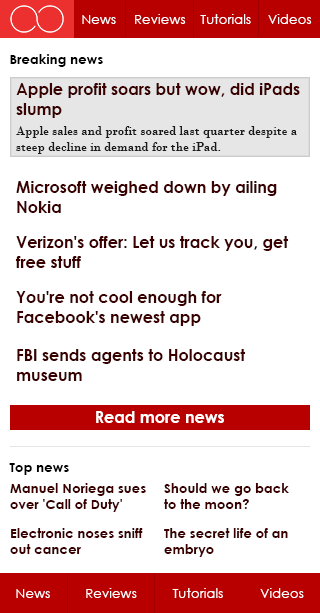
<style>
.page{position:relative;width:320px;height:613px;background:#ffffff}
.page>*{position:absolute;margin:0}
.t1{font:13.3px "CenturyGothic";color:#ffffff}
.t2{font:13.3px "CenturyGothic-Bold";color:#000000}
.t3{font:16px "CenturyGothic-Bold";color:#3a0000}
.t4{font:13.3px "BodoniMT";color:#1a1a1a}
.t5{font:12px "CenturyGothic-Bold";color:#ffffff}
.t6{font:13.3px "CenturyGothic-Bold";color:#3a0000}
</style>
<div class="page">
<p class="t1" style="left:82px;top:15px;width:34px;height:9px">News</p>
<p class="t1" style="left:135px;top:14px;width:51px;height:10px">Reviews</p>
<p class="t1" style="left:200px;top:14px;width:51px;height:10px">Tutorials</p>
<p class="t1" style="left:268px;top:14px;width:44px;height:10px">Videos</p>
<p class="t2" style="left:10px;top:54px;width:93px;height:13px">Breaking news</p>
<p class="t3" style="left:16px;top:83px;width:284px;height:35px">Apple profit soars but wow, did iPads <br>slump</p>
<p class="t4" style="left:16px;top:126px;width:281px;height:28px">Apple sales and profit soared last quarter despite a <br>steep decline in demand for the iPad.</p>
<p class="t3" style="left:16px;top:181px;width:261px;height:32px">Microsoft weighed down by ailing <br>Nokia</p>
<p class="t3" style="left:15px;top:236px;width:274px;height:32px">Verizon's offer: Let us track you, get <br>free stuff</p>
<p class="t3" style="left:16px;top:291px;width:206px;height:35px">You're not cool enough for <br>Facebook's newest app</p>
<p class="t3" style="left:17px;top:349px;width:229px;height:32px">FBI sends agents to Holocaust <br>museum</p>
<p class="t5" style="left:96px;top:411px;width:128px;height:12px">Read more news</p>
<p class="t2" style="left:9px;top:463px;width:60px;height:12px">Top news</p>
<p class="t6" style="left:10px;top:483px;width:136px;height:29px">Manuel Noriega sues <br>over 'Call of Duty'</p>
<p class="t6" style="left:164px;top:483px;width:125px;height:26px">Should we go back <br>to the moon?</p>
<p class="t6" style="left:10px;top:528px;width:133px;height:26px">Electronic noses sniff <br>out cancer</p>
<p class="t6" style="left:164px;top:528px;width:124px;height:29px">The secret life of an <br>embryo</p>
<p class="t1" style="left:16px;top:589px;width:34px;height:9px">News</p>
<p class="t1" style="left:86px;top:588px;width:51px;height:10px">Reviews</p>
<p class="t1" style="left:172px;top:588px;width:51px;height:10px">Tutorials</p>
<p class="t1" style="left:260px;top:588px;width:44px;height:10px">Videos</p>
</div>
